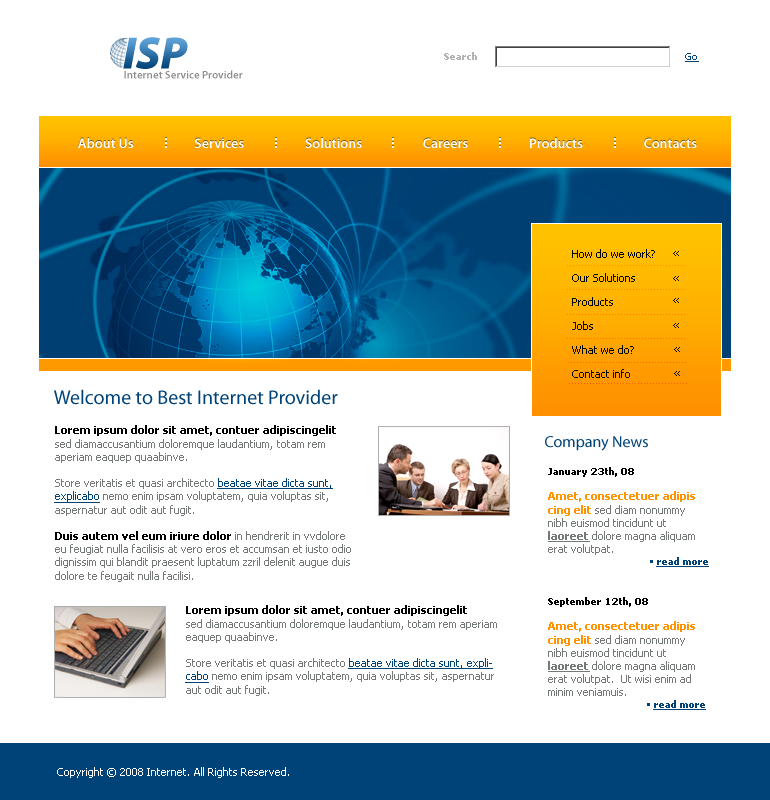
<style>
.page{position:relative;width:770px;height:800px;background:#ffffff}
.page>*{position:absolute;margin:0}
.t1{font:45.8px "MyriadPro-BlackIt"}
.t2{font:10px "Tahoma-Bold";color:#b2b2b2}
.t3{font:10px "Tahoma";color:#004378;text-decoration:underline}
.t4{font:11.1px "MyriadPro-Semibold";color:#8c8c8c}
.t5{font:14px "MyriadPro-Semibold"}
.t6{font:14px "MyriadPro-Semibold";color:#ffffff}
.t7{font:11px/24px "Tahoma";color:#000000}
.t8{font:20px "MyriadPro-Regular";color:#004378}
.t9{font:11px "Tahoma";color:#747877}
.t10{font:11px "Tahoma-Bold";color:#000000}
.t11{font:11px "Tahoma";color:#004378;text-decoration:underline}
.t12{font:16px "MyriadPro-Regular";color:#004378}
.t13{font:10px "Tahoma-Bold";color:#000000}
.t14{font:11px "Tahoma-Bold";color:#ff9300}
.t15{font:11px "Tahoma-Bold";color:#747877;text-decoration:underline}
.t16{font:10px "Tahoma";color:#004378}
.t17{font:10px "Tahoma-Bold";color:#004378;text-decoration:underline}
.t18{font:11px "Tahoma-Bold";color:#747877}
.t19{font:11px "Tahoma";color:#ffffff}
</style>
<div class="page">
<p class="t1" style="left:123px;top:37px;width:65px;height:32px">ISP</p>
<p class="t2" style="left:444px;top:52px;width:33px;height:8px">Search</p>
<p class="t3" style="left:685px;top:53px;width:14px;height:9px">Go</p>
<p class="t4" style="left:124px;top:70px;width:119px;height:9px">Internet Service Provider</p>
<p class="t5" style="left:78px;top:137px;width:619px;height:10px">About Us                     Services                     Solutions                     Careers                     Products                     Contacts</p>
<p class="t6" style="left:78px;top:138px;width:619px;height:10px">About Us                     Services                     Solutions                     Careers                     Products                     Contacts</p>
<p class="t7" style="left:572px;top:249px;width:83px;height:129px">How do we work?<br>Our Solutions<br>Products<br>Jobs<br>What we do?<br>Contact info</p>
<p class="t8" style="left:54px;top:389px;width:284px;height:16px">Welcome to Best Internet Provider</p>
<p class="t9" style="left:54px;top:425px;width:297px;height:157px"><span class="t10">Lorem ipsum dolor sit amet, contuer adipiscingelit<br></span>sed diamaccusantium doloremque laudantium, totam rem aperiam eaquep quaabinve.<br><br>Store veritatis et quasi architecto <span class="t11">beatae vitae dicta sunt, explicabo</span> nemo enim ipsam voluptatem, quia voluptas sit, aspernatur aut odit aut fugit.<br><br><span class="t10">Duis autem vel eum iriure dolor</span> in hendrerit in vvdolore eu feugiat nulla facilisis at vero eros et accumsan et iusto odio dignissim qui blandit praesent luptatum zzril delenit augue duis dolore te feugait nulla facilisi.</p>
<p class="t12" style="left:545px;top:436px;width:103px;height:15px">Company News</p>
<p class="t9" style="left:548px;top:467px;width:161px;height:100px"><span class="t13">January 23th, 08<br><br></span><span class="t14">Amet, consectetuer adipis cing elit</span> sed diam nonummy nibh euismod tincidunt ut <span class="t15">laoreet </span>dolore magna aliquam erat volutpat. <br><span class="t16">• </span><span class="t17">read more</span></p>
<p class="t9" style="left:185px;top:605px;width:312px;height:91px"><span class="t10">Lorem ipsum dolor sit amet, contuer adipiscingelit<br></span>sed diamaccusantium doloremque laudantium, totam rem aperiam eaquep quaabinve.<br><br>Store veritatis et quasi architecto <span class="t11">beatae vitae dicta sunt, explicabo</span> nemo enim ipsam voluptatem, quia voluptas sit, aspernatur aut odit aut fugit.<br><br><span class="t18">Duis autem vel eum iriure dolor</span> in hendrerit in vvdolore eu feugiat nulla facilisis at vero eros et accumsan et iusto odio dignissim qui blandit praesent luptatum zzril delenit augue duis dolore te feugait nulla facilisi.</p>
<p class="t9" style="left:548px;top:597px;width:158px;height:113px"><span class="t13">September 12th, 08<br><br></span><span class="t14">Amet, consectetuer adipis cing elit</span> sed diam nonummy nibh euismod tincidunt ut <span class="t15">laoreet </span>dolore magna aliquam erat volutpat.  Ut wisi enim ad minim veniamuis.<br><span class="t16">• </span><span class="t17">read more</span></p>
<p class="t19" style="left:57px;top:767px;width:232px;height:11px">Copyright © 2008 Internet. All Rights Reserved.</p>
</div>
